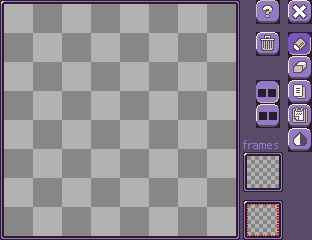
<style>
.page{position:relative;width:312px;height:240px;background:#878787}
.page>*{position:absolute;margin:0}
.t1{font:16px "Nintendo-DS-BIOS";color:#937ac5}
</style>
<div class="page">
<p class="t1" style="left:243px;top:140px;width:35px;height:9px">frames</p>
</div>
